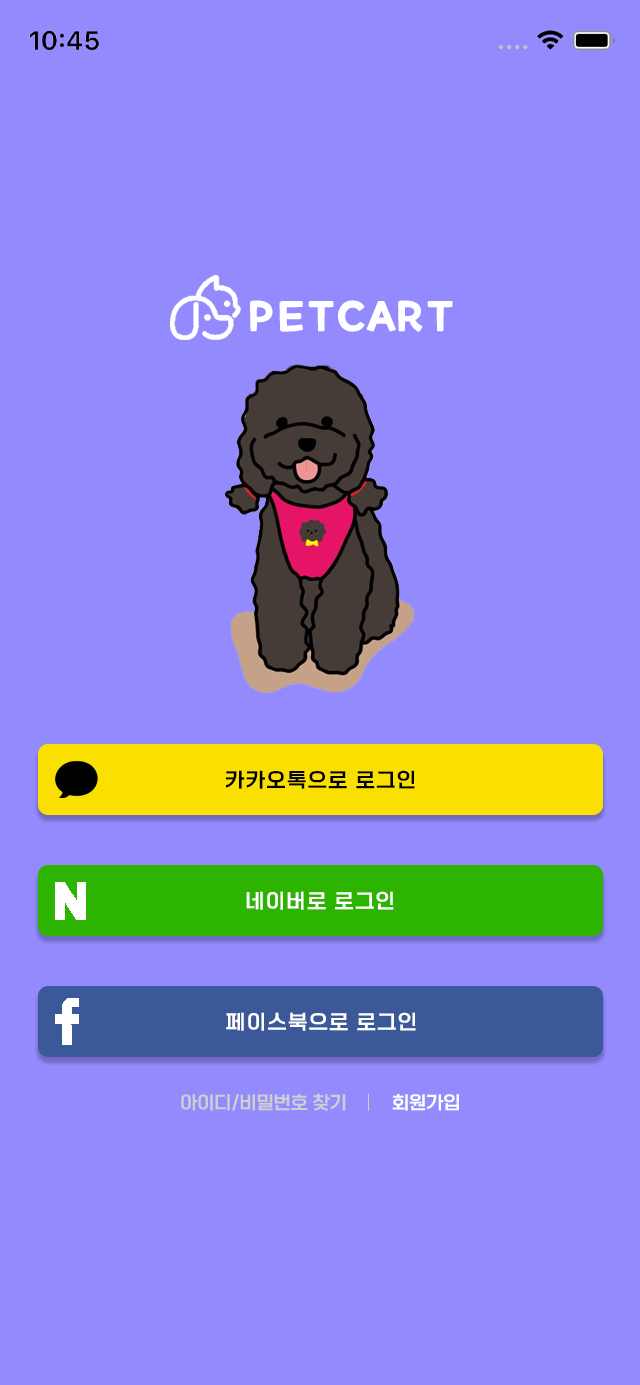
<style>
.page{position:relative;width:640px;height:1385px;background:#938afe}
.page>*{position:absolute;margin:0}
.t1{font:20px "ONEMobileTitleRegular";letter-spacing:0.08em;color:#000000}
.t2{font:20px "ONEMobileTitleRegular";letter-spacing:0.08em;color:#ffffff}
.t3{font:18px "ONEMobileTitleRegular";color:#cfcfcf}
.t4{font:18px "ONEMobileTitleRegular";color:#ffffff}
</style>
<div class="page">
<p class="t1" style="left:226px;top:770px;width:189px;height:19px">카카오톡으로 로그인</p>
<p class="t2" style="left:246px;top:891px;width:148px;height:19px">네이버로 로그인</p>
<p class="t2" style="left:226px;top:1012px;width:190px;height:19px">페이스북으로 로그인</p>
<p class="t3" style="left:181px;top:1093px;width:165px;height:18px">아이디/비밀번호 찾기</p>
<p class="t4" style="left:392px;top:1094px;width:67px;height:17px">회원가입</p>
</div>
